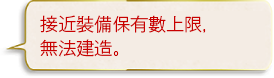
<style>
.page{position:relative;width:274px;height:78px;background:#f4ece4}
.page>*{position:absolute;margin:0}
.t1{font:18px/24px "GothicMB101Pr6N-Light";color:#c90000}
</style>
<div class="page">
<p class="t1" style="left:40px;top:15px;width:166px;height:42px">接近裝備保有數上限，<br>無法建造。</p>
</div>
